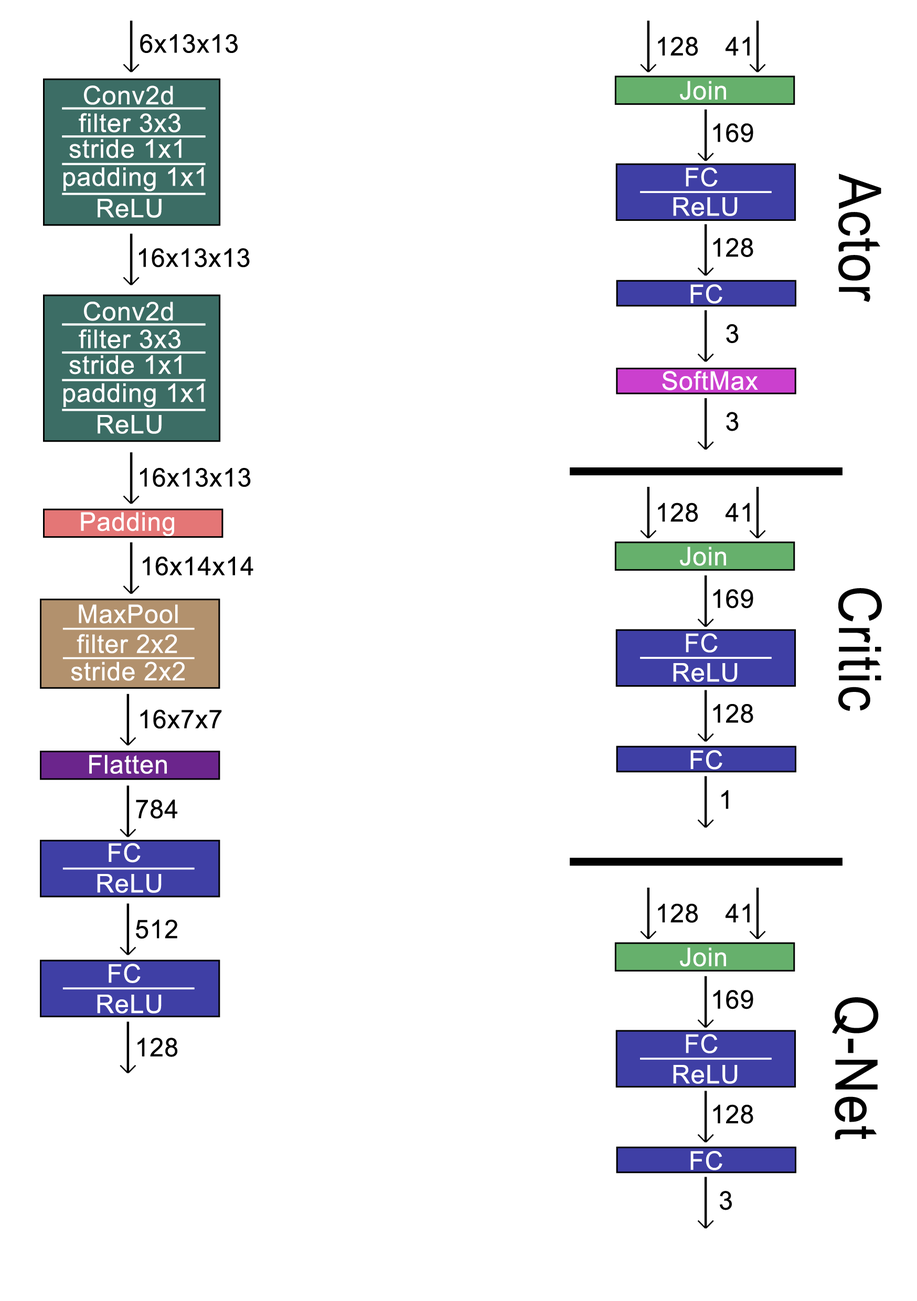
<style>
.page{position:relative;width:917px;height:1301px;background:#ffffff}
.page>*{position:absolute;margin:0}
.t1{font:25.7px "ArialMT";letter-spacing:0.025em;color:#000000}
.t2{font:25.7px "ArialMT";letter-spacing:0.025em;color:#ffffff}
.t3{font:58.7px "ArialMT";letter-spacing:0.025em;color:#000000;scale:0.89 1}
</style>
<div class="page">
<p class="t1" style="left:140px;top:34px;width:98px;height:19px">6x13x13</p>
<p class="t1" style="left:658px;top:37px;width:40px;height:19px">128</p>
<p class="t1" style="left:725px;top:37px;width:24px;height:19px">41</p>
<p class="t2" style="left:84px;top:85px;width:89px;height:20px">Conv2d</p>
<p class="t2" style="left:79px;top:113px;width:101px;height:20px">filter 3x3</p>
<p class="t1" style="left:713px;top:123px;width:40px;height:20px">169</p>
<p class="t2" style="left:69px;top:139px;width:112px;height:19px">stride 1x1</p>
<p class="t2" style="left:63px;top:167px;width:141px;height:24px">padding 1x1</p>
<p class="t3" style="left:838px;top:174px;width:43px;height:128px;rotate:90deg">Actor</p>
<p class="t2" style="left:98px;top:199px;width:64px;height:19px">ReLU</p>
<p class="t1" style="left:713px;top:238px;width:40px;height:19px">128</p>
<p class="t1" style="left:139px;top:248px;width:111px;height:19px">16x13x13</p>
<p class="t2" style="left:84px;top:302px;width:89px;height:19px">Conv2d</p>
<p class="t2" style="left:79px;top:329px;width:101px;height:20px">filter 3x3</p>
<p class="t1" style="left:726px;top:324px;width:12px;height:19px">3</p>
<p class="t2" style="left:69px;top:355px;width:112px;height:19px">stride 1x1</p>
<p class="t2" style="left:662px;top:371px;width:96px;height:19px">SoftMax</p>
<p class="t2" style="left:63px;top:383px;width:141px;height:25px">padding 1x1</p>
<p class="t1" style="left:726px;top:412px;width:12px;height:19px">3</p>
<p class="t2" style="left:98px;top:415px;width:64px;height:19px">ReLU</p>
<p class="t1" style="left:140px;top:468px;width:111px;height:19px">16x13x13</p>
<p class="t1" style="left:658px;top:502px;width:40px;height:20px">128</p>
<p class="t1" style="left:725px;top:502px;width:24px;height:20px">41</p>
<p class="t1" style="left:143px;top:556px;width:110px;height:19px">16x14x14</p>
<p class="t1" style="left:713px;top:589px;width:40px;height:19px">169</p>
<p class="t3" style="left:838px;top:588px;width:44px;height:123px;rotate:90deg">Critic</p>
<p class="t1" style="left:140px;top:709px;width:82px;height:19px">16x7x7</p>
<p class="t1" style="left:713px;top:704px;width:40px;height:19px">128</p>
<p class="t1" style="left:721px;top:790px;width:7px;height:19px">1</p>
<p class="t1" style="left:136px;top:799px;width:41px;height:20px">784</p>
<p class="t1" style="left:658px;top:903px;width:40px;height:20px">128</p>
<p class="t1" style="left:725px;top:903px;width:24px;height:20px">41</p>
<p class="t1" style="left:136px;top:919px;width:41px;height:20px">512</p>
<p class="t1" style="left:713px;top:990px;width:40px;height:19px">169</p>
<p class="t3" style="left:832px;top:997px;width:46px;height:143px;rotate:90deg">Q-Net</p>
<p class="t1" style="left:137px;top:1037px;width:41px;height:20px">128</p>
<p class="t1" style="left:713px;top:1104px;width:40px;height:19px">128</p>
<p class="t1" style="left:720px;top:1191px;width:12px;height:19px">3</p>
</div>
